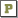
<style>
.page{position:relative;width:18px;height:18px;background:#ffffff}
.page>*{position:absolute;margin:0}
.t1{font:14px "CityD-Bold";letter-spacing:0.075em;color:#888c4b;scale:1.1 1}
</style>
<div class="page">
<p class="t1" style="left:4px;top:4px;width:9px;height:10px">P</p>
</div>
